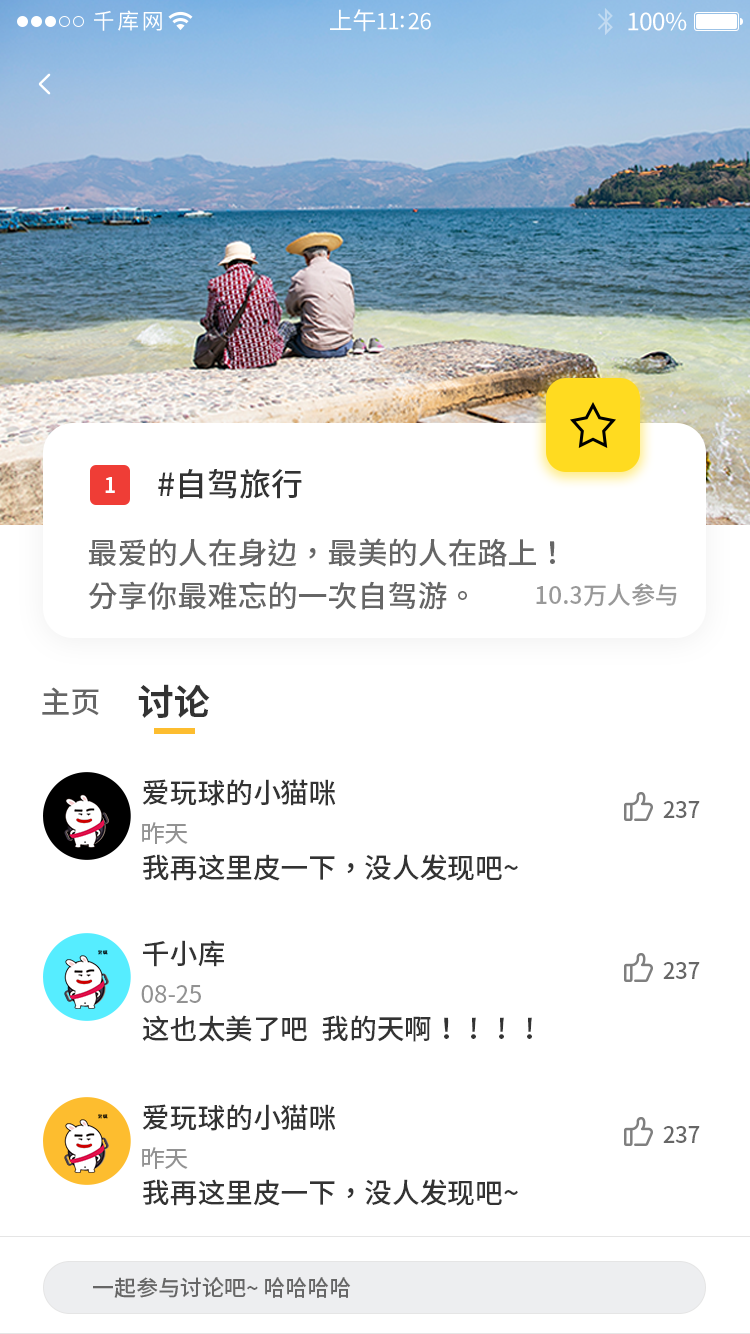
<style>
.page{position:relative;width:750px;height:1334px;background:#ffffff}
.page>*{position:absolute;margin:0}
.t1{font:32px "SourceHanSansSC-Medium";color:#333333}
.t2{font:20.7px "SourceHanSansSC-Bold";color:#ffffff}
.t3{font:30px "SourceHanSansSC-Medium";color:#666666}
.t4{font:24px "SourceHanSansSC-Medium";color:#999999}
.t5{font:36px "SourceHanSansSC-Bold";color:#333333}
.t6{font:27.8px "SourceHanSansSC-Medium";color:#333333}
.t7{font:22px "SourceHanSansSC-Medium";color:#666666}
.t8{font:24px "SourceHanSansSC-Regular";color:#929292}
</style>
<div class="page">
<p class="t1" style="left:158px;top:469px;width:144px;height:30px">#自驾旅行</p>
<p class="t2" style="left:105px;top:477px;width:10px;height:16px">1</p>
<p class="t3" style="left:88px;top:538px;width:467px;height:29px">最爱的人在身边，最美的人在路上！</p>
<p class="t3" style="left:88px;top:581px;width:379px;height:29px">分享你最难忘的一次自驾游。</p>
<p class="t4" style="left:536px;top:583px;width:141px;height:24px">10.3万人参与</p>
<p class="t3" style="left:42px;top:687px;width:57px;height:29px">主页</p>
<p class="t5" style="left:138px;top:684px;width:72px;height:34px">讨论</p>
<p class="t6" style="left:142px;top:779px;width:194px;height:27px">爱玩球的小猫咪</p>
<p class="t7" style="left:663px;top:801px;width:37px;height:17px">237</p>
<p class="t8" style="left:142px;top:822px;width:46px;height:22px">昨天</p>
<p class="t6" style="left:143px;top:854px;width:375px;height:27px">我再这里皮一下，没人发现吧~</p>
<p class="t6" style="left:143px;top:940px;width:81px;height:27px">千小库</p>
<p class="t7" style="left:663px;top:962px;width:37px;height:17px">237</p>
<p class="t8" style="left:141px;top:985px;width:60px;height:18px">08-25</p>
<p class="t6" style="left:142px;top:1015px;width:390px;height:27px">这也太美了吧  我的天啊！！！！</p>
<p class="t6" style="left:142px;top:1104px;width:194px;height:27px">爱玩球的小猫咪</p>
<p class="t7" style="left:663px;top:1126px;width:37px;height:17px">237</p>
<p class="t8" style="left:142px;top:1147px;width:46px;height:22px">昨天</p>
<p class="t6" style="left:143px;top:1179px;width:375px;height:27px">我再这里皮一下，没人发现吧~</p>
<p class="t7" style="left:93px;top:1277px;width:258px;height:21px">一起参与讨论吧~ 哈哈哈哈</p>
</div>
